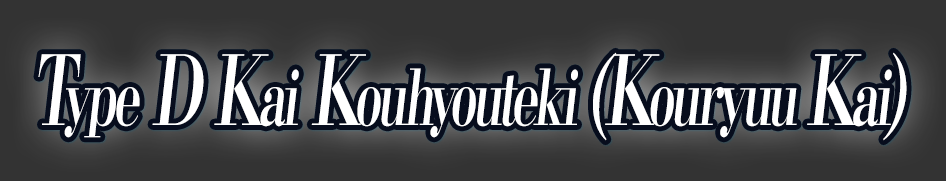
<style>
.page{position:relative;width:946px;height:181px;background:#333333}
.page>*{position:absolute;margin:0}
.t1{font:76.8px "KochoStd-Heavy";letter-spacing:-0.08em;color:#ffffff;font-style:italic;scale:0.65 1}
.t2{font:96px "KochoStd-Heavy";letter-spacing:-0.08em;color:#ffffff;font-style:italic;scale:0.65 1}
</style>
<div class="page">
<p class="t1" style="left:38px;top:52px;width:869px;height:89px"><span class="t2">T</span>ype<span class="t2"> D K</span>ai<span class="t2"> K</span>ouhyouteki <span class="t2">(K</span>ouryuu <span class="t2">K</span>ai<span class="t2">)</span></p>
</div>
